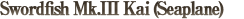
<style>
.page{position:relative;width:244px;height:19px;background:#ffffff}
.page>*{position:absolute;margin:0}
.t1{font:18px "RyuminPro-ExBold";letter-spacing:-0.08em;color:#4a3f32;font-weight:bold;scale:0.9 1}
</style>
<div class="page">
<p class="t1" style="left:0px;top:1px;width:224px;height:18px">Swordfish Mk.III Kai (Seaplane)</p>
</div>
